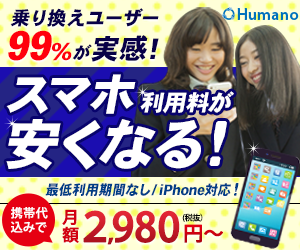
<style>
.page{position:relative;width:300px;height:250px}
.page>*{position:absolute;margin:0}
.t1{font:19.2px "HeiseiKakuGoStd-W9";letter-spacing:0.06em;color:#080147;font-style:italic}
.t2{font:19.2px "HeiseiKakuGoStd-W9";letter-spacing:0.02em;color:#080147;font-style:italic}
.t3{font:40px "HeiseiKakuGoStd-W9";letter-spacing:-0.02em;color:#ff000c;font-style:italic}
.t4{font:23.5px "HeiseiKakuGoStd-W9";letter-spacing:-0.02em;color:#ff000c;font-style:italic}
.t5{font:17.1px "HeiseiKakuGoStd-W9";letter-spacing:0.08em;color:#080147;font-style:italic}
.t6{font:27.7px "HeiseiKakuGoStd-W9";letter-spacing:0.06em;color:#080147;font-style:italic}
.t7{font:27.7px "HeiseiKakuGoStd-W9";letter-spacing:0.1em;color:#080147;font-style:italic}
.t8{font:27.7px "HeiseiKakuGoStd-W9";letter-spacing:0.14em;color:#080147;font-style:italic}
.t9{font:45.2px "HeiseiKakuGoStd-W9";letter-spacing:-0.1em;color:#ffffff;font-style:italic}
.t10{font:45.2px "HeiseiKakuGoStd-W9";color:#ffffff;font-style:italic}
.t11{font:45.2px "HeiseiKakuGoStd-W9";letter-spacing:0.04em;color:#ffffff;font-style:italic}
.t12{font:22.6px "HeiseiKakuGoStd-W9";letter-spacing:-0.02em;color:#ffffff;font-style:italic}
.t13{font:55.3px "HeiseiKakuGoStd-W9";letter-spacing:-0.02em;color:#ffffff;font-style:italic}
.t14{font:61.7px "HeiseiKakuGoStd-W9";letter-spacing:-0.02em;color:#ffffff;font-style:italic}
.t15{font:14.1px "HeiseiKakuGoStd-W9";letter-spacing:0.02em;color:#013d86;font-style:italic;scale:0.93 1}
.t16{font:14.1px "HeiseiKakuGoStd-W9";letter-spacing:-0.02em;color:#013d86;font-style:italic;scale:0.93 1}
.t17{font:17.3px "HeiseiKakuGoStd-W9";letter-spacing:0.02em;color:#013d86;font-style:italic;scale:0.93 1}
.t18{font:12px/14.3px "KozGoPro-Medium";letter-spacing:0.04em;color:#fefefe}
.t19{font:16.5px/22.5px "KozGoPro-Medium";letter-spacing:-0.32em;color:#d20011;font-weight:bold}
.t20{font:39.7px "KozGoPro-Medium";letter-spacing:-0.12em;font-weight:bold}
.t21{font:39.7px "KozGoPro-Medium";letter-spacing:-0.14em;font-weight:bold}
.t22{font:25px "KozGoPro-Medium";letter-spacing:-0.14em;font-weight:bold}
.t23{font:8px "KozGoPro-Medium";letter-spacing:-0.04em;color:#000000}
.t24{font:20px "KozGoPro-Medium";letter-spacing:-0.32em;color:#cf0111;font-weight:bold}
</style>
<div class="page">
<p class="t1" style="left:10px;top:8px;width:149px;height:19px">乗り換え<span class="t2">ユーザー</span></p>
<p class="t3" style="left:8px;top:30px;width:64px;height:31px">99<span class="t4">%</span></p>
<p class="t5" style="left:72px;top:35px;width:87px;height:27px">が<span class="t6">実</span><span class="t7">感</span><span class="t8">!</span></p>
<p class="t9" style="left:6px;top:74px;width:130px;height:40px">ス<span class="t10">マ</span><span class="t11">ホ</span></p>
<p class="t12" style="left:140px;top:91px;width:94px;height:23px">利用料が</p>
<p class="t13" style="left:6px;top:119px;width:221px;height:51px">安くなる<span class="t14">！</span></p>
<p class="t15" style="left:45px;top:183px;width:194px;height:14px">最低利用期間なし/<span class="t16">iPhone</span>対応<span class="t17">！</span></p>
<p class="t18" style="left:10px;top:207px;width:38px;height:26px">携帯代<br>込みで</p>
<p class="t19" style="left:62px;top:209px;width:17px;height:34px">月額</p>
<p class="t20" style="left:83px;top:210px;width:97px;height:35px"><span class="t21">２</span><span class="t22">,</span>980</p>
<p class="t23" style="left:182px;top:213px;width:21px;height:9px">(税抜）</p>
<p class="t24" style="left:184px;top:224px;width:39px;height:19px">円〜</p>
</div>
